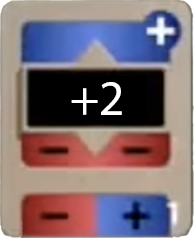
<style>
.page{position:relative;width:194px;height:238px}
.page>*{position:absolute;margin:0}
.t1{font:50px "MyriadPro-Regular";color:#ffffff}
</style>
<div class="page">
<p class="t1" style="left:71px;top:82px;width:51px;height:33px">+2</p>
</div>
